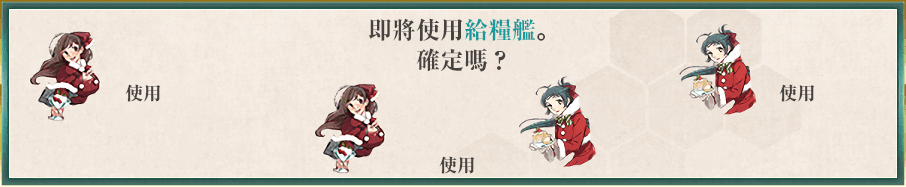
<style>
.page{position:relative;width:906px;height:187px}
.page>*{position:absolute;margin:0}
.t1{font:24px/30px "RyuminPr6N-ExBold";color:#46423f}
.t2{font:24px/30px "RyuminPr6N-ExBold";color:#199a9c}
.t3{font:18px "RyuminPr6N-ExBold";color:#46423f}
</style>
<div class="page">
<p class="t1" style="left:368px;top:18px;width:177px;height:54px;text-align:center">即將使用<span class="t2">給糧艦</span>。<br>確定嗎？</p>
<p class="t3" style="left:125px;top:84px;width:36px;height:18px">使用</p>
<p class="t3" style="left:779px;top:84px;width:36px;height:18px">使用</p>
<p class="t3" style="left:439px;top:156px;width:36px;height:18px">使用</p>
</div>
